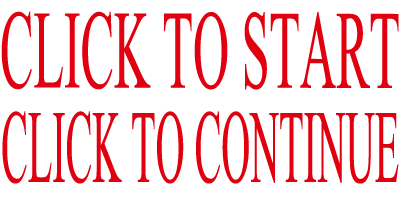
<style>
.page{position:relative;width:400px;height:200px;background:#ffffff}
.page>*{position:absolute;margin:0}
.t1{font:111.6px "MongolianBaiti";color:#e00010;scale:0.45 1}
.t2{font:103.9px "MongolianBaiti";color:#e00010;scale:0.39 1}
</style>
<div class="page">
<p class="t1" style="left:1px;top:11px;width:398px;height:79px">CLICK TO START</p>
<p class="t2" style="left:2px;top:111px;width:397px;height:73px">CLICK TO CONTINUE</p>
</div>
